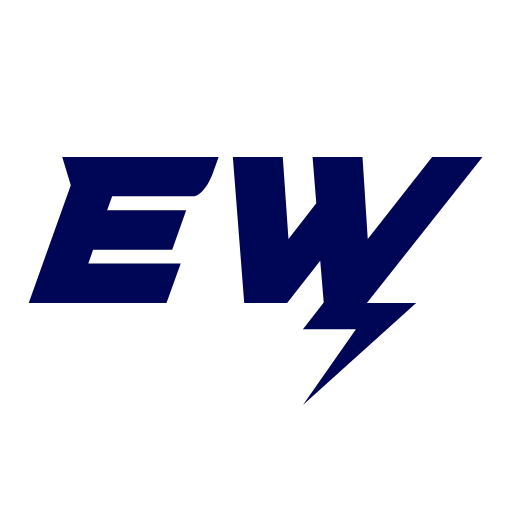
<style>
.page{position:relative;width:512px;height:512px;background:#ffffff}
.page>*{position:absolute;margin:0}
.t1{font:219px "SuperchargeItalic";color:#000656}
</style>
<div class="page">
<p class="t1" style="left:28px;top:156px;width:455px;height:250px">EW</p>
</div>
